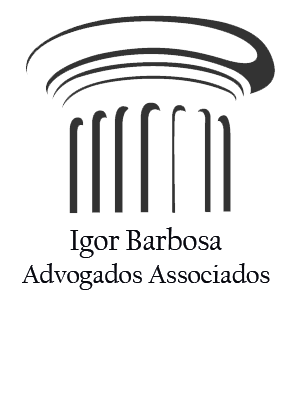
<style>
.page{position:relative;width:300px;height:400px;background:#ffffff}
.page>*{position:absolute;margin:0}
.t1{font:27px "CalifornianFB-Reg";color:#08090e}
.t2{font:30px "CalifornianFB-Reg";color:#08090e}
.t3{font:59.9px "Gabriola";color:#ffffff}
</style>
<div class="page">
<p class="t1" style="left:22px;top:227px;width:248px;height:63px;text-align:center"><span class="t2">Igor Barbosa<br></span>Advogados Associados<br><span class="t3">r</span></p>
</div>
